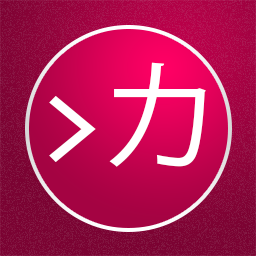
<style>
.page{position:relative;width:256px;height:256px}
.page>*{position:absolute;margin:0}
.t1{font:121.1px "Consolas";color:#ffffff}
.t2{font:121.1px "KozGoPr6N-Regular";color:#ffffff}
</style>
<div class="page">
<p class="t1" style="left:49px;top:62px;width:157px;height:105px">&gt;<span class="t2">カ</span></p>
</div>
